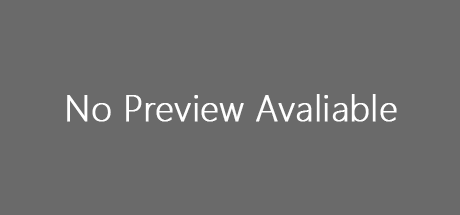
<style>
.page{position:relative;width:460px;height:215px;background:#6a6a6a}
.page>*{position:absolute;margin:0}
.t1{font:36px "SegoeUI-Light";color:#ffffff;font-weight:bold}
</style>
<div class="page">
<p class="t1" style="left:67px;top:94px;width:330px;height:28px">No Preview Avaliable</p>
</div>
